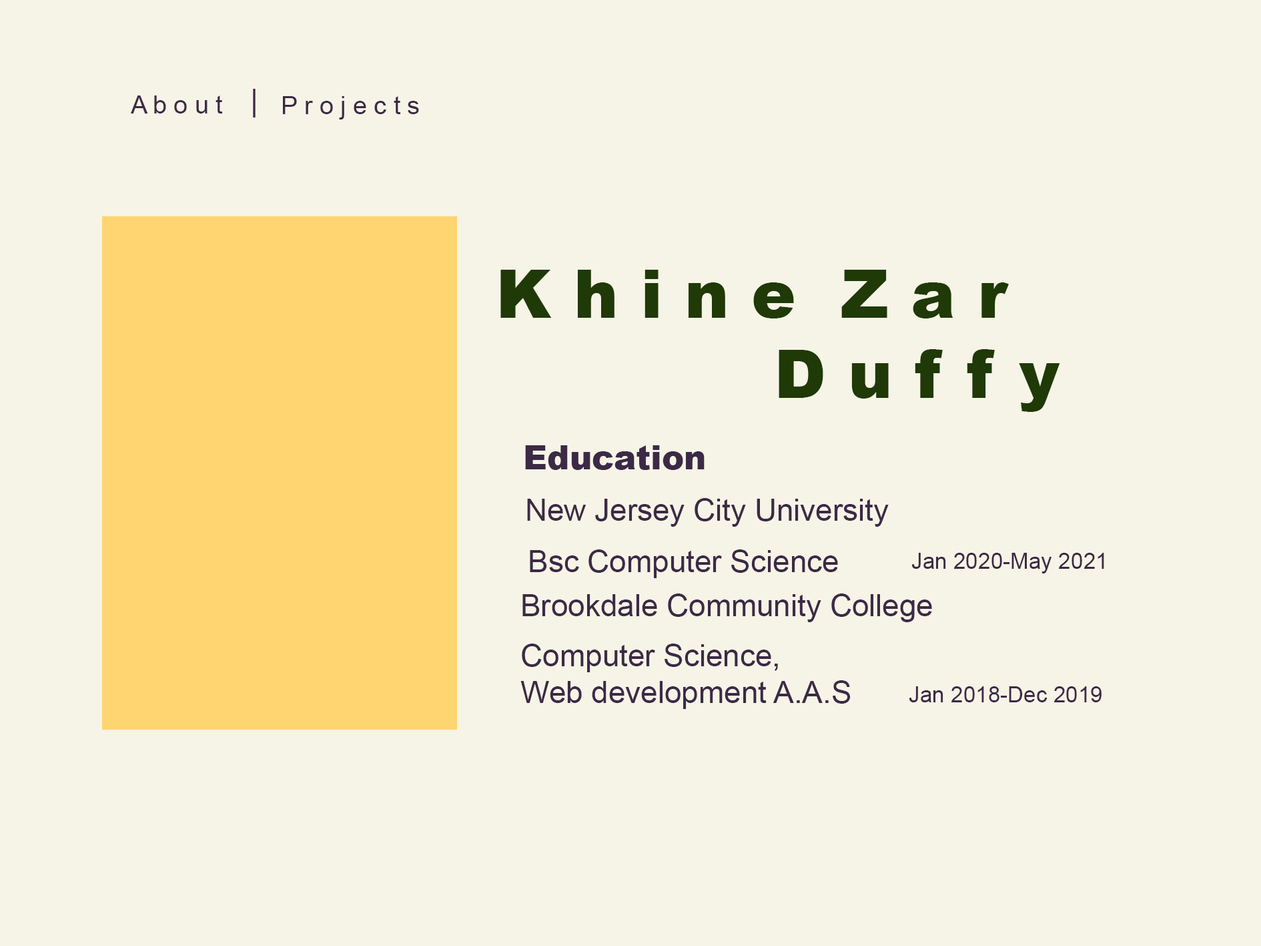
<style>
.page{position:relative;width:1261px;height:946px;background:#f6f4e6}
.page>*{position:absolute;margin:0}
.t1{font:30.6px "ArialMT";color:#3c2946}
.t2{font:25px "ArialMT";color:#3c2946}
.t3{font:66.7px "Arial-Black";color:#1f3907}
.t4{font:33.4px "Arial-Black";color:#3c2946}
.t5{font:22.2px "ArialMT";color:#3c2946}
</style>
<div class="page">
<p class="t1" style="left:253px;top:89px;width:3px;height:28px">|</p>
<p class="t2" style="left:131px;top:95px;width:92px;height:18px">A b o u t</p>
<p class="t2" style="left:283px;top:96px;width:136px;height:23px">P r o j e c t s</p>
<p class="t3" style="left:500px;top:270px;width:560px;height:142px;text-align:center">K h i n e  Z a r  <br>D u f f y</p>
<p class="t4" style="left:525px;top:445px;width:180px;height:25px">Education</p>
<p class="t1" style="left:527px;top:498px;width:362px;height:28px">New Jersey City University</p>
<p class="t1" style="left:530px;top:549px;width:308px;height:29px">Bsc Computer Science</p>
<p class="t5" style="left:911px;top:552px;width:193px;height:21px">Jan 2020-May 2021</p>
<p class="t1" style="left:522px;top:593px;width:410px;height:29px">Brookdale Community College</p>
<p class="t1" style="left:520px;top:643px;width:331px;height:66px">Computer Science,<br>Web development A.A.S</p>
<p class="t5" style="left:909px;top:686px;width:193px;height:16px">Jan 2018-Dec 2019</p>
</div>
